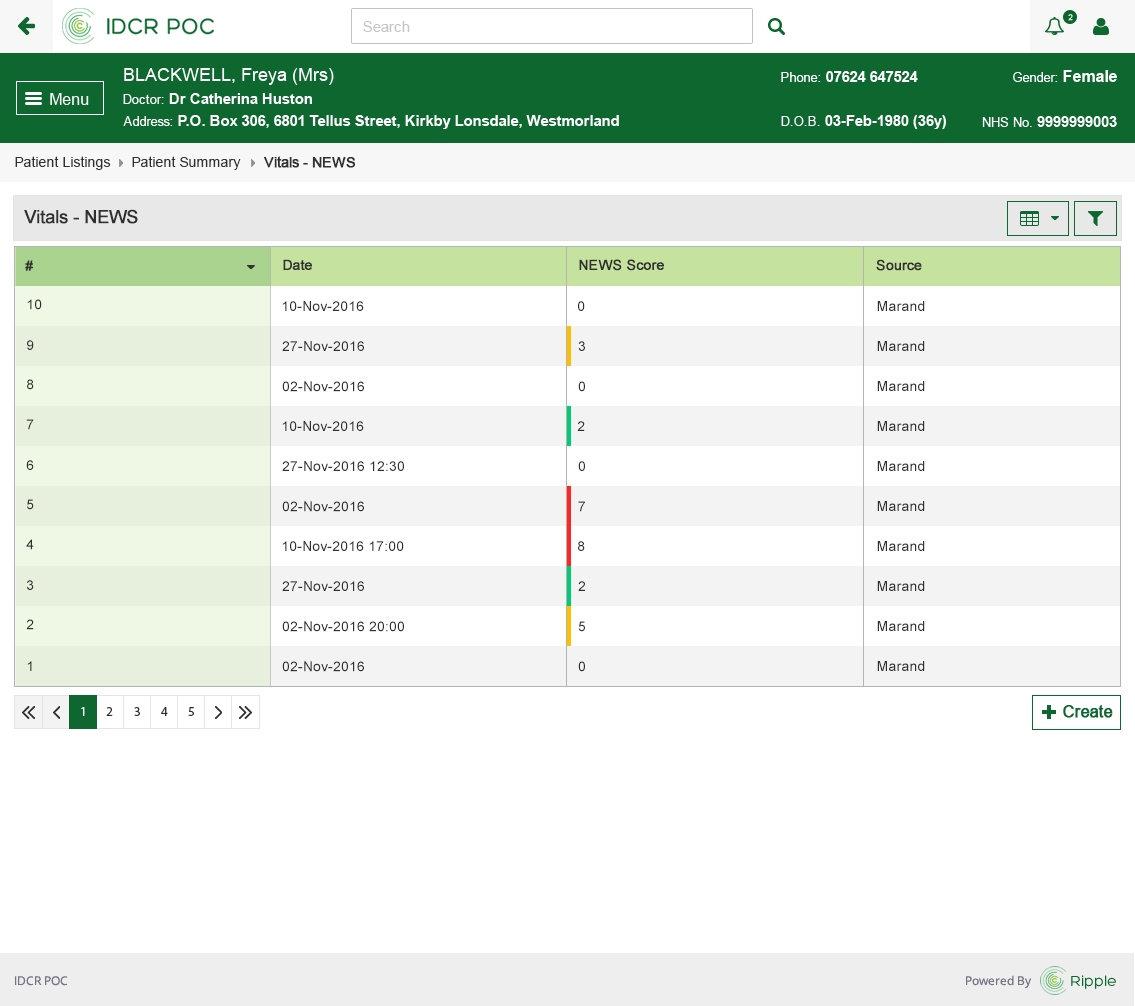
<style>
.page{position:relative;width:1135px;height:1006px;background:#ffffff}
.page>*{position:absolute;margin:0}
.t1{font:14px "ArialMT";color:#313131}
.t2{font:14px "ArialMT";color:#313131;font-weight:bold}
.t3{font:18px "ArialMT";color:#303030;font-weight:bold}
.t4{font:14px "ArialMT";color:#303030;font-weight:bold}
.t5{font:14px "ArialMT";color:#303030}
</style>
<div class="page">
<p class="t1" style="left:15px;top:156px;width:96px;height:14px">Patient Listings</p>
<p class="t1" style="left:132px;top:156px;width:109px;height:14px">Patient Summary</p>
<p class="t2" style="left:264px;top:156px;width:91px;height:12px">Vitals - NEWS</p>
<p class="t3" style="left:24px;top:209px;width:114px;height:15px">Vitals - NEWS</p>
<p class="t4" style="left:25px;top:260px;width:8px;height:11px">#</p>
<p class="t4" style="left:283px;top:259px;width:29px;height:11px">Date</p>
<p class="t4" style="left:579px;top:259px;width:85px;height:12px">NEWS Score</p>
<p class="t4" style="left:876px;top:259px;width:46px;height:12px">Source</p>
<p class="t5" style="left:27px;top:299px;width:15px;height:11px">10</p>
<p class="t5" style="left:282px;top:301px;width:82px;height:10px">10-Nov-2016</p>
<p class="t5" style="left:578px;top:301px;width:7px;height:10px">0</p>
<p class="t5" style="left:877px;top:301px;width:48px;height:10px">Marand</p>
<p class="t5" style="left:27px;top:340px;width:7px;height:10px">9</p>
<p class="t5" style="left:282px;top:341px;width:82px;height:10px">27-Nov-2016</p>
<p class="t5" style="left:578px;top:341px;width:7px;height:10px">3</p>
<p class="t5" style="left:877px;top:341px;width:48px;height:10px">Marand</p>
<p class="t5" style="left:27px;top:379px;width:7px;height:11px">8</p>
<p class="t5" style="left:282px;top:381px;width:82px;height:11px">02-Nov-2016</p>
<p class="t5" style="left:578px;top:381px;width:7px;height:11px">0</p>
<p class="t5" style="left:877px;top:381px;width:48px;height:10px">Marand</p>
<p class="t5" style="left:26px;top:419px;width:8px;height:11px">7</p>
<p class="t5" style="left:282px;top:421px;width:82px;height:10px">10-Nov-2016</p>
<p class="t5" style="left:577px;top:421px;width:8px;height:10px">2</p>
<p class="t5" style="left:877px;top:421px;width:48px;height:10px">Marand</p>
<p class="t5" style="left:26px;top:460px;width:8px;height:10px">6</p>
<p class="t5" style="left:282px;top:461px;width:122px;height:10px">27-Nov-2016 12:30</p>
<p class="t5" style="left:578px;top:461px;width:7px;height:10px">0</p>
<p class="t5" style="left:877px;top:461px;width:48px;height:10px">Marand</p>
<p class="t5" style="left:27px;top:499px;width:7px;height:11px">5</p>
<p class="t5" style="left:282px;top:501px;width:82px;height:11px">02-Nov-2016</p>
<p class="t5" style="left:578px;top:501px;width:7px;height:11px">7</p>
<p class="t5" style="left:877px;top:501px;width:48px;height:10px">Marand</p>
<p class="t5" style="left:26px;top:539px;width:8px;height:11px">4</p>
<p class="t5" style="left:282px;top:541px;width:122px;height:10px">10-Nov-2016 17:00</p>
<p class="t5" style="left:578px;top:541px;width:7px;height:10px">8</p>
<p class="t5" style="left:877px;top:541px;width:48px;height:10px">Marand</p>
<p class="t5" style="left:27px;top:580px;width:7px;height:10px">3</p>
<p class="t5" style="left:282px;top:581px;width:82px;height:10px">27-Nov-2016</p>
<p class="t5" style="left:578px;top:581px;width:7px;height:10px">2</p>
<p class="t5" style="left:877px;top:581px;width:48px;height:10px">Marand</p>
<p class="t5" style="left:26px;top:619px;width:8px;height:11px">2</p>
<p class="t5" style="left:282px;top:621px;width:122px;height:11px">02-Nov-2016 20:00</p>
<p class="t5" style="left:578px;top:621px;width:7px;height:11px">5</p>
<p class="t5" style="left:877px;top:621px;width:48px;height:10px">Marand</p>
<p class="t5" style="left:27px;top:661px;width:5px;height:10px">1</p>
<p class="t5" style="left:282px;top:661px;width:82px;height:11px">02-Nov-2016</p>
<p class="t5" style="left:578px;top:661px;width:7px;height:11px">0</p>
<p class="t5" style="left:877px;top:661px;width:48px;height:10px">Marand</p>
</div>
